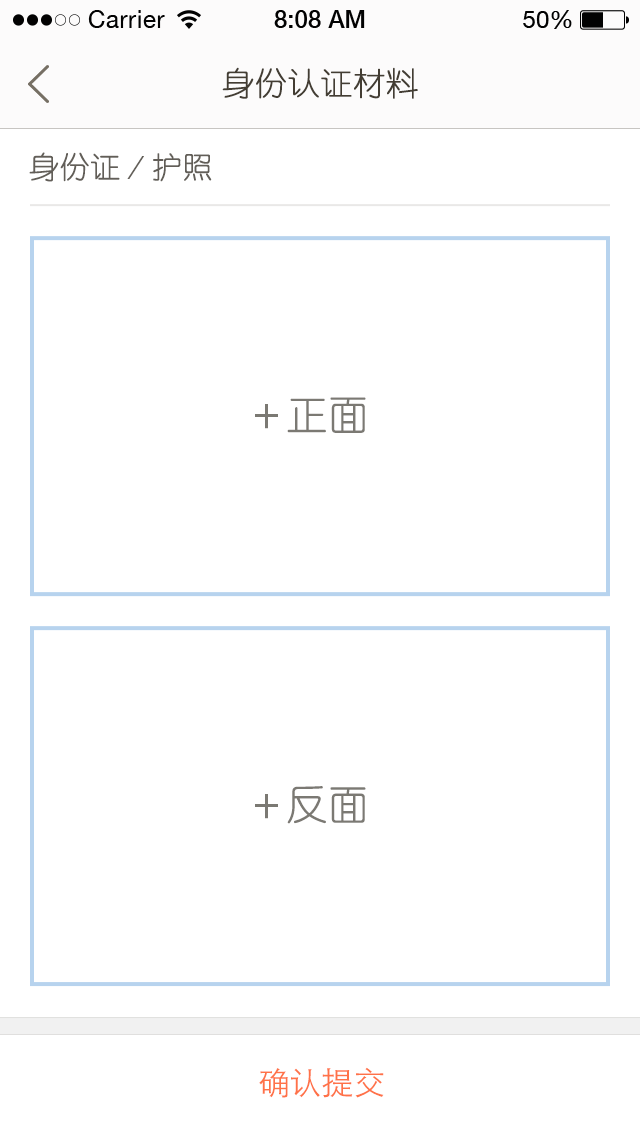
<style>
.page{position:relative;width:640px;height:1136px;background:#ffffff}
.page>*{position:absolute;margin:0}
.t1{font:32px "YouYuan";color:#433d33;text-transform:uppercase;font-weight:bold}
.t2{font:30px "YouYuan";color:#625e58;text-transform:uppercase;font-weight:bold}
.t3{font:40px "YouYuan";color:#7b7973;text-transform:uppercase;font-weight:bold}
.t4{font:32px "STHeitiSC-Light";color:#ff7248;text-transform:uppercase}
</style>
<div class="page">
<p class="t1" style="left:222px;top:67px;width:196px;height:32px">身份认证材料</p>
<p class="t2" style="left:29px;top:152px;width:183px;height:30px">身份证／护照</p>
<p class="t3" style="left:255px;top:397px;width:111px;height:36px">＋正面</p>
<p class="t3" style="left:255px;top:786px;width:111px;height:38px">＋反面</p>
<p class="t4" style="left:259px;top:1067px;width:125px;height:31px">确认提交</p>
</div>
